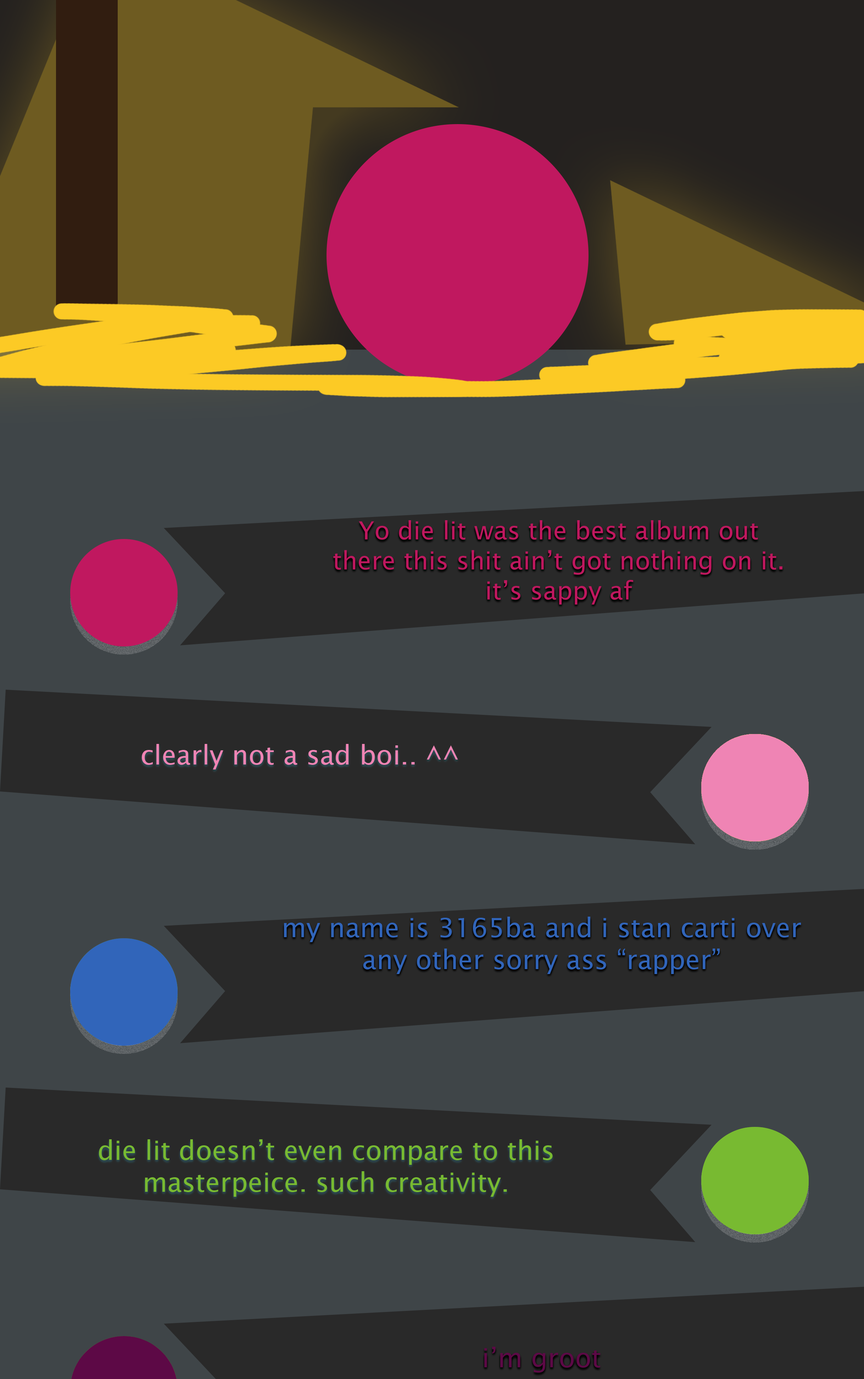
<style>
.page{position:relative;width:864px;height:1379px;background:#3f4548}
.page>*{position:absolute;margin:0}
.t1{font:26.6px "LucidaSans";color:#ef84b4}
.t2{font:26.6px "LucidaSans";color:#3165ba}
.t3{font:26.6px "LucidaSans";color:#78ba31}
.t4{font:26.6px "LucidaSans";color:#5d0946}
</style>
<div class="page">
<p class="t1" style="left:142px;top:744px;width:316px;height:26px">clearly not a sad boi.. ^^</p>
<p class="t2" style="left:284px;top:917px;width:518px;height:57px;text-align:center">my name is 3165ba and i stan carti over any other sorry ass “rapper”</p>
<p class="t3" style="left:99px;top:1140px;width:454px;height:57px;text-align:center">die lit doesn’t even compare to this masterpeice. such creativity.</p>
<p class="t4" style="left:485px;top:1347px;width:116px;height:26px">i’m groot</p>
</div>
